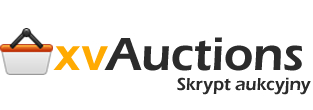
<style>
.page{position:relative;width:313px;height:110px;background:#ffffff}
.page>*{position:absolute;margin:0}
.t1{font:48px "ErasITC-Demi";color:#2b2b2b}
.t2{font:48px "ErasITC-Demi";color:#feaa00}
.t3{font:18px "ErasITC-Demi";color:#2b2b2b}
</style>
<div class="page">
<p class="t1" style="left:104px;top:37px;width:198px;height:34px">Auctions</p>
<p class="t2" style="left:53px;top:46px;width:55px;height:24px">xv</p>
<p class="t3" style="left:177px;top:77px;width:134px;height:18px">Skrypt aukcyjny</p>
</div>
